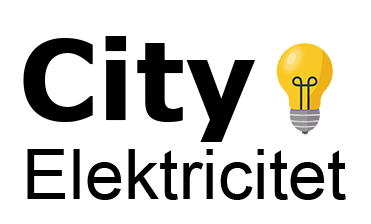
<style>
.page{position:relative;width:371px;height:224px;background:#ffffff}
.page>*{position:absolute;margin:0}
.t1{font:110px "Verdana-Bold";color:#000000}
.t2{font:70.3px "ArialMT";color:#000000}
</style>
<div class="page">
<p class="t1" style="left:23px;top:36px;width:233px;height:106px">City</p>
<p class="t2" style="left:27px;top:149px;width:319px;height:51px">Elektricitet</p>
</div>
